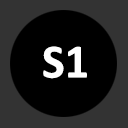
<style>
.page{position:relative;width:128px;height:128px;background:#000000}
.page>*{position:absolute;margin:0}
.t1{font:48px "Calibri-Bold";color:#ffffff}
</style>
<div class="page">
<p class="t1" style="left:43px;top:46px;width:44px;height:33px">S1</p>
</div>
